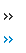
<style>
.page{position:relative;width:26px;height:53px;background:#ffffff}
.page>*{position:absolute;margin:0}
.t1{font:13px "BerlinSansFBDemi-Bold";color:#333333}
.t2{font:13px "BerlinSansFBDemi-Bold";color:#0087ca}
</style>
<div class="page">
<p class="t1" style="left:4px;top:13px;width:9px;height:7px">&gt;&gt;</p>
<p class="t2" style="left:4px;top:36px;width:9px;height:7px">&gt;&gt;</p>
</div>
